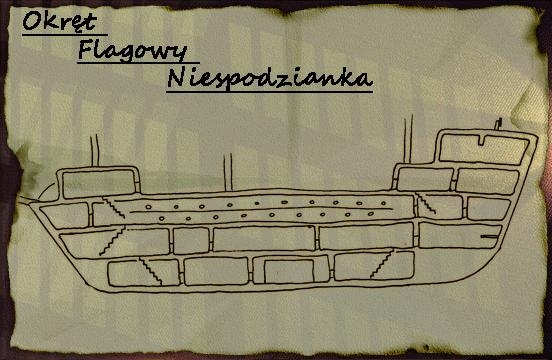
<style>
.page{position:relative;width:552px;height:360px}
.page>*{position:absolute;margin:0}
.t1{font:24px "SegoeScript";color:#000000;font-weight:bold;text-decoration:underline}
</style>
<div class="page">
<p class="t1" style="left:22px;top:10px;width:351px;height:83px">Okręt <br>     Flagowy <br>    Niespodzianka</p>
</div>
